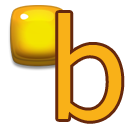
<style>
.page{position:relative;width:128px;height:128px;background:#ffffff}
.page>*{position:absolute;margin:0}
.t1{font:132.9px "SourceHanSansCN-Regular";color:#f9b118}
</style>
<div class="page">
<p class="t1" style="left:58px;top:13px;width:64px;height:108px">b</p>
</div>
